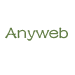
<style>
.page{position:relative;width:75px;height:75px;background:#ffffff}
.page>*{position:absolute;margin:0}
.t1{font:18px "FZSTK--GBK1-0";color:#5c783e}
</style>
<div class="page">
<p class="t1" style="left:5px;top:27px;width:63px;height:14px">Anyweb</p>
</div>
